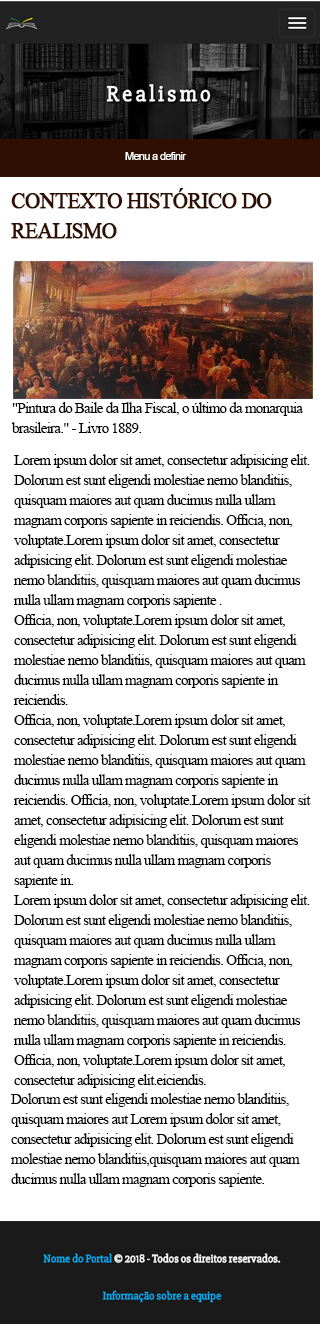
<style>
.page{position:relative;width:320px;height:1324px;background:#ffffff}
.page>*{position:absolute;margin:0}
.t1{font:11px "ArialMT";letter-spacing:-0.05em;color:#ffffff}
.t2{font:22px/30px "TimesNewRomanPSMT";letter-spacing:-0.05em;color:#2f0f01;font-weight:bold}
.t3{font:15.4px/20px "TimesNewRomanPSMT";letter-spacing:-0.05em;color:#000000}
</style>
<div class="page">
<p class="t1" style="left:125px;top:152px;width:62px;height:8px">Menu a definir</p>
<p class="t2" style="left:11px;top:188px;width:261px;height:51px">CONTEXTO HISTÓRICO DO <br>REALISMO</p>
<p class="t3" style="left:11px;top:402px;width:292px;height:31px">"Pintura do Baile da Ilha Fiscal, o último da monarquia brasileira." - Livro 1889.</p>
<p class="t3" style="left:14px;top:454px;width:297px;height:634px">Lorem ipsum dolor sit amet, consectetur adipisicing elit. Dolorum est sunt eligendi molestiae nemo blanditiis, quisquam maiores aut quam ducimus nulla ullam magnam corporis sapiente in reiciendis. Officia, non, voluptate.Lorem ipsum dolor sit amet, consectetur adipisicing elit. Dolorum est sunt eligendi molestiae nemo blanditiis, quisquam maiores aut quam ducimus nulla ullam magnam corporis sapiente .<br>Officia, non, voluptate.Lorem ipsum dolor sit amet, consectetur adipisicing elit. Dolorum est sunt eligendi molestiae nemo blanditiis, quisquam maiores aut quam ducimus nulla ullam magnam corporis sapiente in reiciendis. <br>Officia, non, voluptate.Lorem ipsum dolor sit amet, consectetur adipisicing elit. Dolorum est sunt eligendi molestiae nemo blanditiis, quisquam maiores aut quam ducimus nulla ullam magnam corporis sapiente in reiciendis. Officia, non, voluptate.Lorem ipsum dolor sit amet, consectetur adipisicing elit. Dolorum est sunt eligendi molestiae nemo blanditiis, quisquam maiores aut quam ducimus nulla ullam magnam corporis sapiente in.<br>Lorem ipsum dolor sit amet, consectetur adipisicing elit. Dolorum est sunt eligendi molestiae nemo blanditiis, quisquam maiores aut quam ducimus nulla ullam magnam corporis sapiente in reiciendis. Officia, non, voluptate.Lorem ipsum dolor sit amet, consectetur adipisicing elit. Dolorum est sunt eligendi molestiae nemo blanditiis, quisquam maiores aut quam ducimus nulla ullam magnam corporis sapiente in reiciendis. Officia, non, voluptate.Lorem ipsum dolor sit amet, consectetur adipisicing elit.eiciendis.</p>
<p class="t3" style="left:11px;top:1093px;width:289px;height:94px">Dolorum est sunt eligendi molestiae nemo blanditiis, quisquam maiores aut Lorem ipsum dolor sit amet, consectetur adipisicing elit. Dolorum est sunt eligendi molestiae nemo blanditiis,quisquam maiores aut quam ducimus nulla ullam magnam corporis sapiente.</p>
</div>
